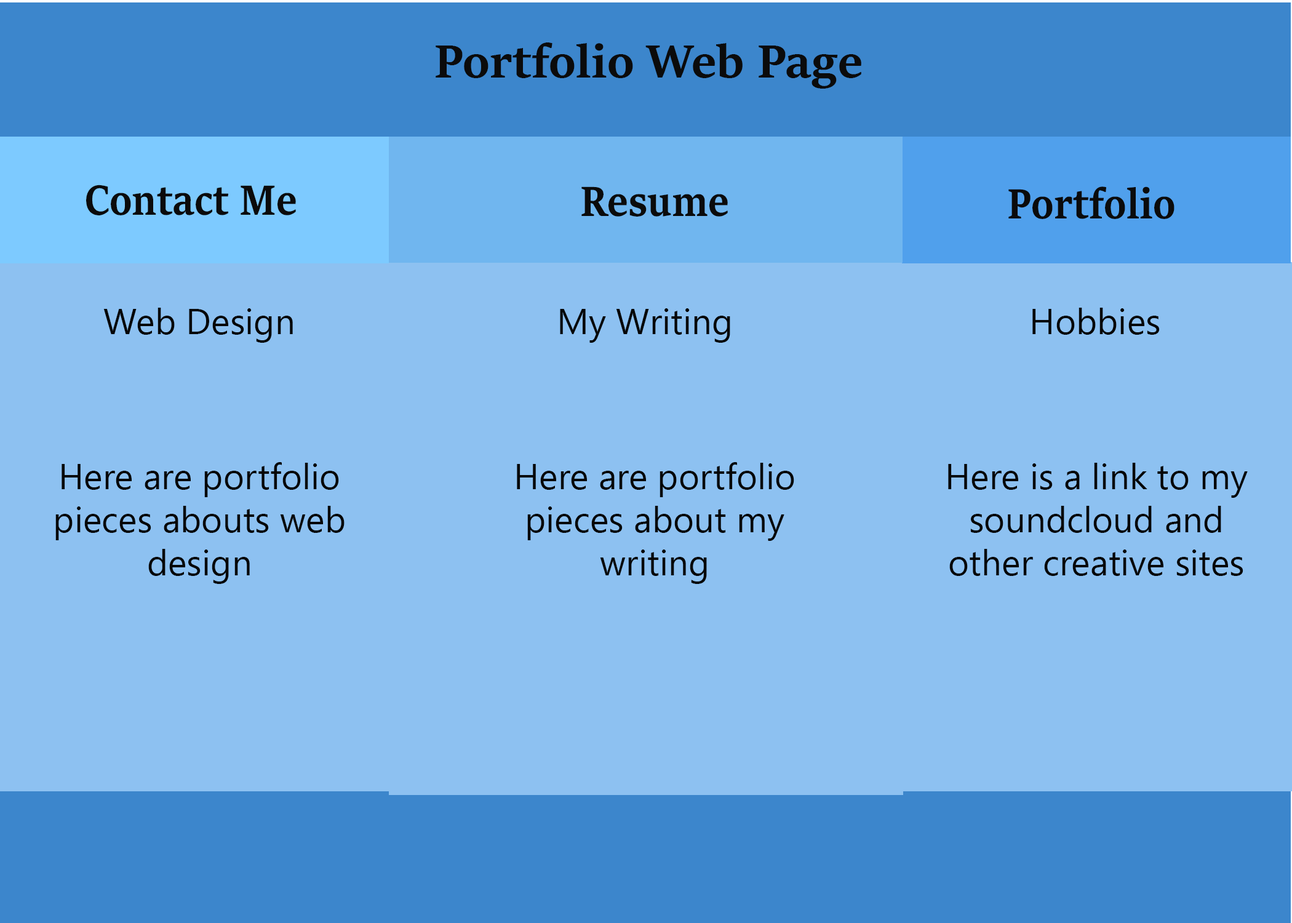
<style>
.page{position:relative;width:1292px;height:923px;background:#8dc1f1}
.page>*{position:absolute;margin:0}
.t1{font:51.3px "SitkaHeading-Bold";color:#0b0b0b}
.t2{font:46.1px "SitkaSubheading-Bold";color:#0b0b0b;scale:0.88 1}
.t3{font:35.9px "Gadugi";color:#060606}
</style>
<div class="page">
<p class="t1" style="left:436px;top:42px;width:425px;height:47px">Portfolio Web Page</p>
<p class="t2" style="left:86px;top:185px;width:210px;height:30px">Contact Me</p>
<p class="t2" style="left:581px;top:186px;width:147px;height:31px">Resume</p>
<p class="t2" style="left:1008px;top:186px;width:167px;height:33px">Portfolio</p>
<p class="t3" style="left:103px;top:308px;width:190px;height:35px">Web Design</p>
<p class="t3" style="left:560px;top:308px;width:170px;height:35px">My Writing</p>
<p class="t3" style="left:1032px;top:308px;width:128px;height:27px">Hobbies</p>
<p class="t3" style="left:55px;top:462px;width:290px;height:122px;text-align:center">Here are portfolio pieces abouts web design</p>
<p class="t3" style="left:517px;top:462px;width:277px;height:122px;text-align:center">Here are portfolio pieces about my writing</p>
<p class="t3" style="left:948px;top:463px;width:300px;height:113px;text-align:center">Here is a link to my soundcloud and other creative sites</p>
</div>
